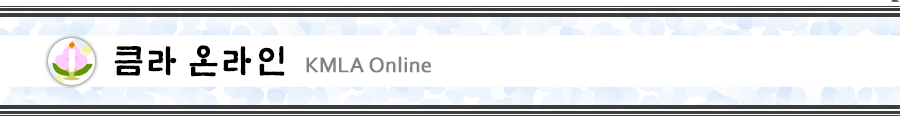
<style>
.page{position:relative;width:900px;height:124px;background:#ffffff}
.page>*{position:absolute;margin:0}
.t1{font:22px "Corbel";color:#828282;font-weight:bold}
.t2{font:33px "MHunmin";color:#000000;font-weight:bold}
</style>
<div class="page">
<p class="t1" style="left:114px;top:45px;width:317px;height:32px"><span class="t2">큼라 온라인 </span>KMLA Online</p>
</div>
